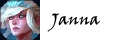
<style>
.page{position:relative;width:140px;height:40px;background:#ffffff}
.page>*{position:absolute;margin:0}
.t1{font:12px "VinerHandITC";color:#000000}
</style>
<div class="page">
<p class="t1" style="left:47px;top:13px;width:53px;height:19px">Janna</p>
</div>
